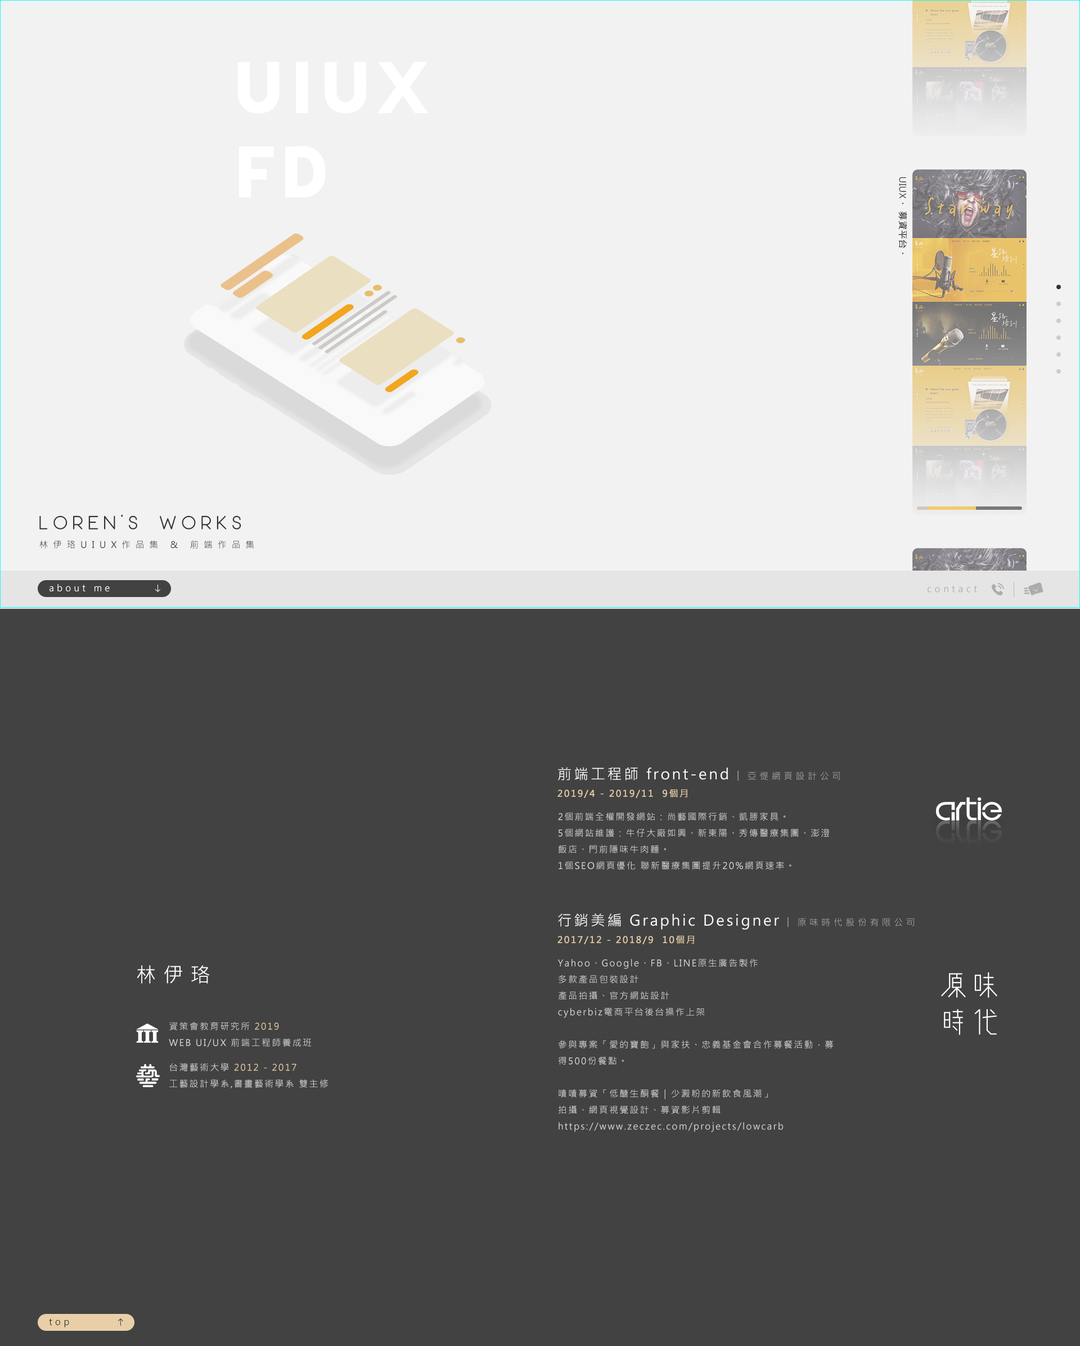
<style>
.page{position:relative;width:1080px;height:1346px;background:#424242}
.page>*{position:absolute;margin:0}
.t1{font:80.2px/84.4px "Affogato-Bold";letter-spacing:0.05em;color:#ffffff;scale:1.05 1}
.t2{font:9px "MicrosoftJhengHeiRegular";letter-spacing:0.025em;color:#333333;font-weight:bold}
.t3{font:9px "MicrosoftJhengHeiRegular";letter-spacing:0.025em;color:#333333}
.t4{font:9px/18.6px "MicrosoftJhengHeiRegular";letter-spacing:0.54em;color:#333333}
.t5{font:19.1px/43.8px "Moon2.0-Regular";letter-spacing:0.26em;color:#333333}
.t6{font:9px "MicrosoftJhengHeiRegular";letter-spacing:0.32em;color:#fffefe}
.t7{font:9px "MicrosoftJhengHeiRegular";letter-spacing:0.34em;color:#acacac}
.t8{font:14.6px "MicrosoftJhengHeiRegular";letter-spacing:0.14em;color:#ffffff}
.t9{font:9px "MicrosoftJhengHeiRegular";letter-spacing:0.14em;color:#a6a6a6}
.t10{font:9px "MicrosoftJhengHeiRegular";letter-spacing:0.34em;color:#a6a6a6}
.t11{font:9px "MicrosoftJhengHeiRegular";letter-spacing:0.14em;color:#e8cfa8;font-weight:bold}
.t12{font:9px/16.3px "MicrosoftJhengHeiRegular";letter-spacing:0.14em;color:#d8d8d8}
.t13{font:20.2px "MicrosoftJhengHeiRegular";letter-spacing:0.34em;color:#ffffff}
.t14{font:9px/16.3px "MicrosoftJhengHeiRegular";letter-spacing:0.14em;color:#e8cfa8}
.t15{font:9px "MicrosoftJhengHeiRegular";letter-spacing:0.32em;color:#333333}
</style>
<div class="page">
<p class="t1" style="left:237px;top:61px;width:191px;height:136px">UIUX<br>FD</p>
<p class="t2" style="left:898px;top:177px;width:9px;height:77px;rotate:90deg"><span class="t3">UIUX</span>・ 募資平台・</p>
<p class="t4" style="left:39px;top:514px;width:215px;height:34px"><span class="t5">LOREN’S WORKS<br></span>林伊珞UIUX作品集 &amp; 前端作品集</p>
<p class="t6" style="left:50px;top:584px;width:60px;height:7px">about me</p>
<p class="t7" style="left:928px;top:586px;width:49px;height:6px">contact</p>
<p class="t8" style="left:558px;top:767px;width:282px;height:14px">前端工程師 front-end <span class="t9">|  </span><span class="t10">亞惿網頁設計公司</span></p>
<p class="t11" style="left:557px;top:789px;width:130px;height:9px">2019/4 - 2019/11  9個月</p>
<p class="t12" style="left:558px;top:812px;width:272px;height:58px">2個前端全權開發網站：尚藝國際行銷、凱勝家具。<br>5個網站維護：牛仔大廠如興、新東陽、秀傳醫療集團、澎澄飯店、門前隱味牛肉麵。<br>1個SEO網頁優化 聯新醫療集團提升20%網頁速率。</p>
<p class="t8" style="left:558px;top:913px;width:356px;height:16px">行銷美編 Graphic Designer <span class="t9">|  </span><span class="t10">原味時代股份有限公司</span></p>
<p class="t11" style="left:557px;top:935px;width:137px;height:9px">2017/12 - 2018/9  10個月</p>
<p class="t13" style="left:137px;top:965px;width:72px;height:18px">林伊珞</p>
<p class="t12" style="left:558px;top:958px;width:275px;height:174px">Yahoo、Google、FB、LINE原生廣告製作<br>多款產品包裝設計<br>產品拍攝、官方網站設計<br>cyberbiz電商平台後台操作上架<br><br>參與專案「愛的寶飽」與家扶、忠義基金會合作募餐活動，募得500份餐點。<br><br>嘖嘖募資「低醣生酮餐｜少澱粉的新飲食風潮」<br>拍攝、網頁視覺設計、募資影片剪輯<br>https://www.zeczec.com/projects/lowcarb</p>
<p class="t12" style="left:169px;top:1022px;width:142px;height:25px">資策會教育研究所 <span class="t14">2019<br></span>WEB UI/UX 前端工程師養成班</p>
<p class="t12" style="left:169px;top:1063px;width:159px;height:25px">台灣藝術大學 <span class="t14">2012 - 2017<br></span>工藝設計學系,書畫藝術學系 雙主修</p>
<p class="t15" style="left:49px;top:1318px;width:20px;height:9px">top</p>
</div>
